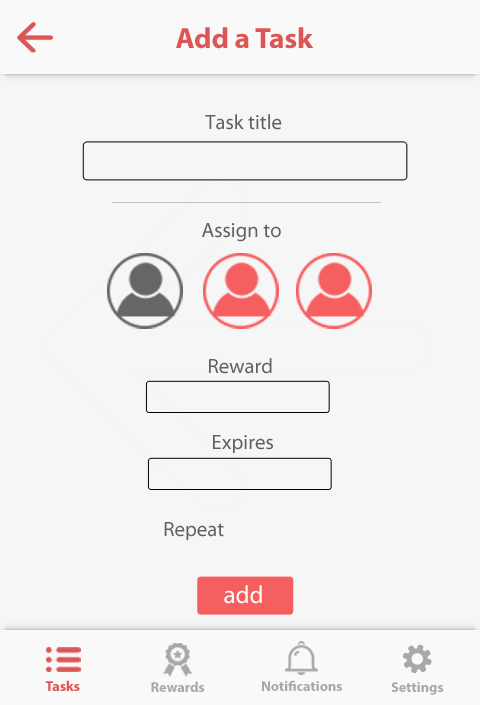
<style>
.page{position:relative;width:480px;height:705px;background:#f6f6f6}
.page>*{position:absolute;margin:0}
.t1{font:29.2px "MyriadPro-Bold";color:#dd5555}
.t2{font:20.8px "MyriadPro-Regular";color:#606060}
.t3{font:25px "MyriadPro-Regular";color:#ffffff}
.t4{font:14.2px "MyriadPro-Bold";color:#dd5555}
.t5{font:14.2px "MyriadPro-Bold";color:#a8a8a8}
</style>
<div class="page">
<p class="t1" style="left:176px;top:27px;width:138px;height:22px">Add a Task</p>
<p class="t2" style="left:205px;top:114px;width:77px;height:16px">Task title</p>
<p class="t2" style="left:202px;top:223px;width:79px;height:19px">Assign to</p>
<p class="t2" style="left:209px;top:358px;width:63px;height:16px">Reward</p>
<p class="t2" style="left:213px;top:435px;width:60px;height:18px">Expires</p>
<p class="t2" style="left:164px;top:522px;width:60px;height:18px">Repeat</p>
<p class="t3" style="left:224px;top:585px;width:38px;height:19px">add</p>
<p class="t4" style="left:45px;top:680px;width:35px;height:11px">Tasks</p>
<p class="t5" style="left:151px;top:681px;width:54px;height:11px">Rewards</p>
<p class="t5" style="left:262px;top:680px;width:80px;height:11px">Notifications</p>
<p class="t5" style="left:391px;top:682px;width:53px;height:13px">Settings</p>
</div>
